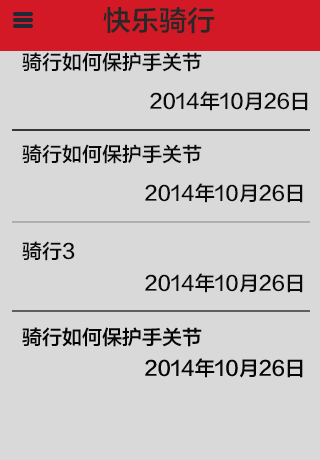
<style>
.page{position:relative;width:320px;height:460px;background:#d9d9d9}
.page>*{position:absolute;margin:0}
.t1{font:28px "FZLTZHK--GBK1-0";color:#282828}
.t2{font:20px "FZLTZHK--GBK1-0";color:#0b0b0b}
</style>
<div class="page">
<p class="t1" style="left:103px;top:7px;width:112px;height:27px">快乐骑行</p>
<p class="t2" style="left:22px;top:52px;width:180px;height:20px">骑行如何保护手关节</p>
<p class="t2" style="left:150px;top:91px;width:158px;height:20px">2014年10月26日</p>
<p class="t2" style="left:22px;top:144px;width:180px;height:20px">骑行如何保护手关节</p>
<p class="t2" style="left:145px;top:183px;width:158px;height:20px">2014年10月26日</p>
<p class="t2" style="left:22px;top:241px;width:53px;height:20px">骑行3</p>
<p class="t2" style="left:145px;top:273px;width:158px;height:20px">2014年10月26日</p>
<p class="t2" style="left:22px;top:327px;width:180px;height:20px">骑行如何保护手关节</p>
<p class="t2" style="left:145px;top:358px;width:158px;height:20px">2014年10月26日</p>
</div>
